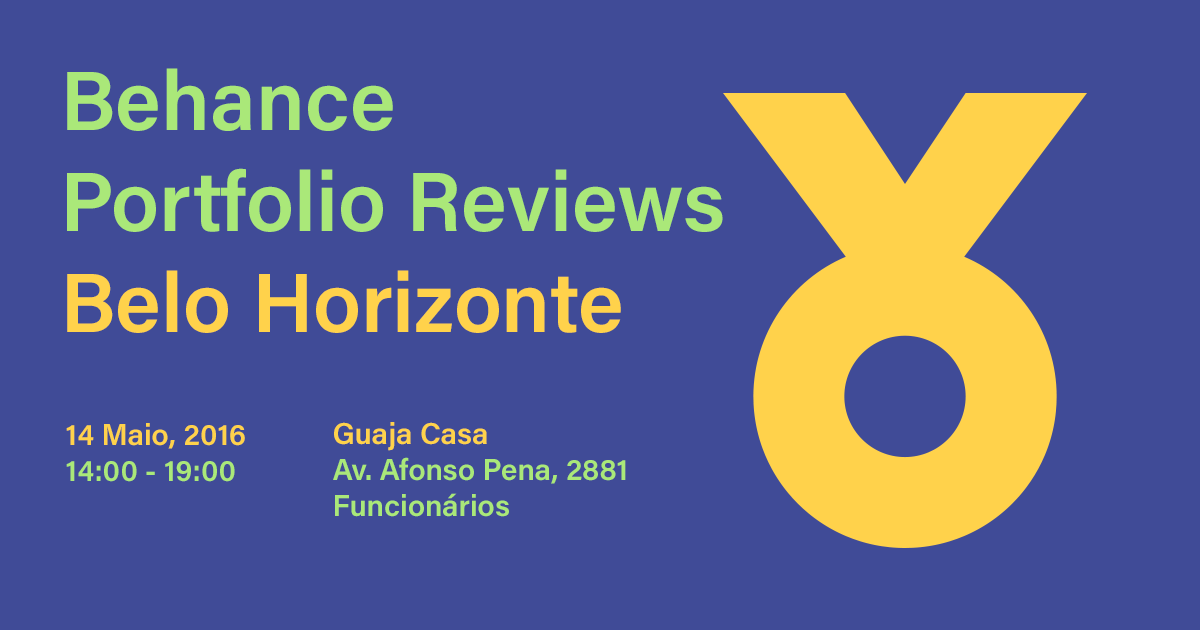
<style>
.page{position:relative;width:1200px;height:630px;background:#404b97}
.page>*{position:absolute;margin:0}
.t1{font:84px "AcuminPro-Semibold";color:#aae879}
.t2{font:84px "AcuminPro-Semibold";color:#ffd24b}
.t3{font:30px "AcuminPro-Semibold";color:#ffd24b}
.t4{font:30px "AcuminPro-Semibold";color:#aae879}
</style>
<div class="page">
<p class="t1" style="left:67px;top:68px;width:656px;height:265px">Behance <br>Portfolio Reviews<br><span class="t2">Belo Horizonte</span></p>
<p class="t3" style="left:66px;top:423px;width:179px;height:59px">14 Maio, 2016<br><span class="t4">14:00 - 19:00</span></p>
<p class="t4" style="left:333px;top:422px;width:293px;height:95px"><span class="t3">Guaja Casa<br></span>Av. Afonso Pena, 2881<br>Funcionários</p>
</div>
